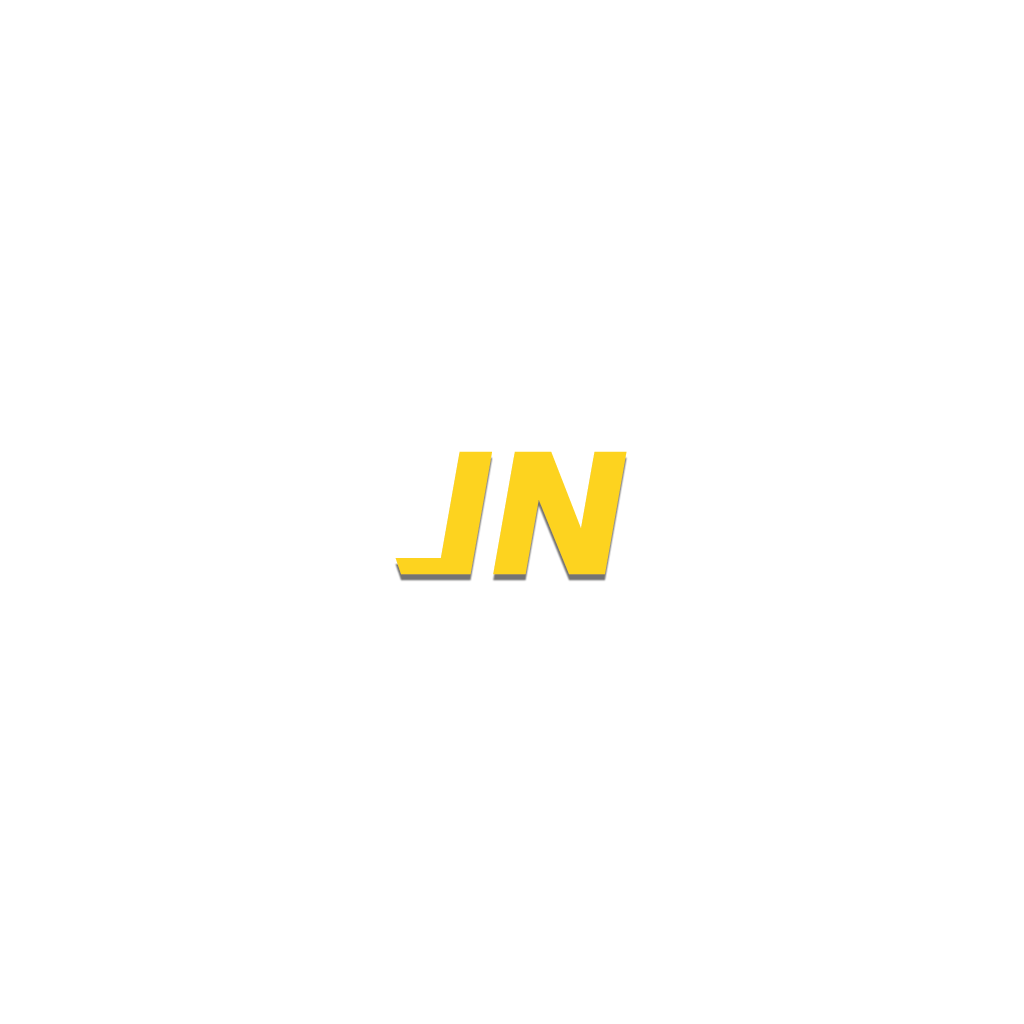
<style>
.page{position:relative;width:1024px;height:1024px;background:#ffffff}
.page>*{position:absolute;margin:0}
.t1{font:160px "MStiffHeiPRC-UltraBold";letter-spacing:0.03em;color:#fdd31f;font-weight:bold;font-style:italic}
</style>
<div class="page">
<p class="t1" style="left:395px;top:451px;width:232px;height:124px">JN</p>
</div>
